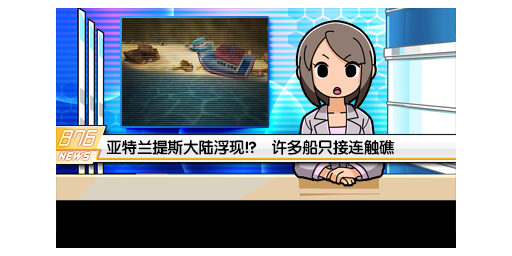
<style>
.page{position:relative;width:512px;height:256px;background:#ffffff}
.page>*{position:absolute;margin:0}
.t1{font:16px "FZY4K--GBK1-0";letter-spacing:-0.04em;color:#000000}
</style>
<div class="page">
<p class="t1" style="left:106px;top:139px;width:288px;height:16px">亚特兰提斯大陆浮现!?　许多船只接连触礁</p>
</div>
